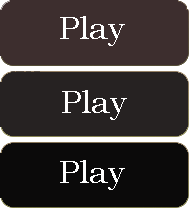
<style>
.page{position:relative;width:193px;height:213px;background:#3d2e2e}
.page>*{position:absolute;margin:0}
.t1{font:32px "BookmanOldStyle";color:#ffffff}
</style>
<div class="page">
<p class="t1" style="left:60px;top:16px;width:65px;height:30px">Play</p>
<p class="t1" style="left:62px;top:90px;width:65px;height:30px">Play</p>
<p class="t1" style="left:60px;top:160px;width:65px;height:30px">Play</p>
</div>
